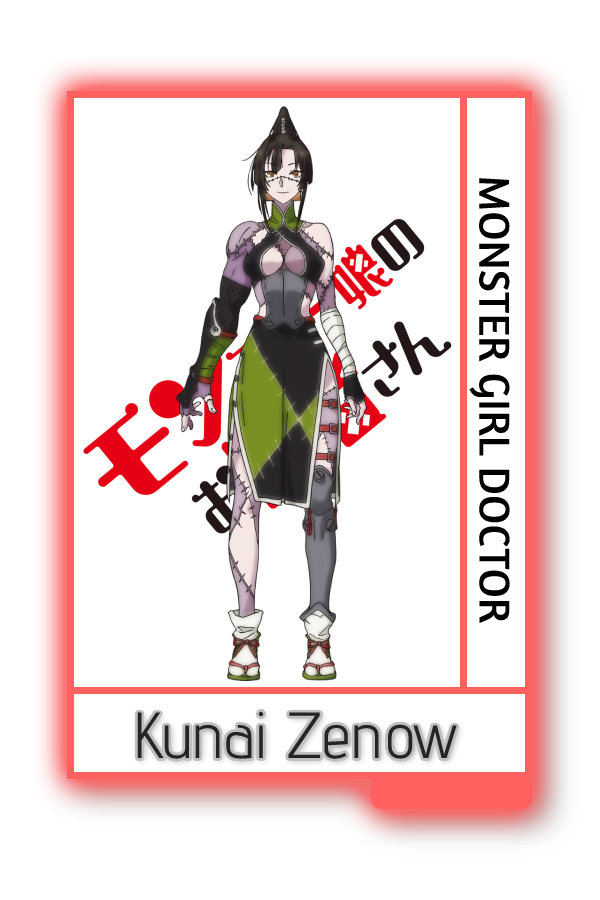
<style>
.page{position:relative;width:600px;height:900px;background:#ffffff}
.page>*{position:absolute;margin:0}
.t1{font:44px "Amaranth-Regular";color:#000000}
.t2{font:65px "AdventPro-Regular";color:#252525}
</style>
<div class="page">
<p class="t1" style="left:469px;top:178px;width:41px;height:446px;rotate:90deg">MONSTER GIRL DOCTOR</p>
<p class="t2" style="left:137px;top:711px;width:320px;height:48px">Kunai Zenow</p>
</div>
